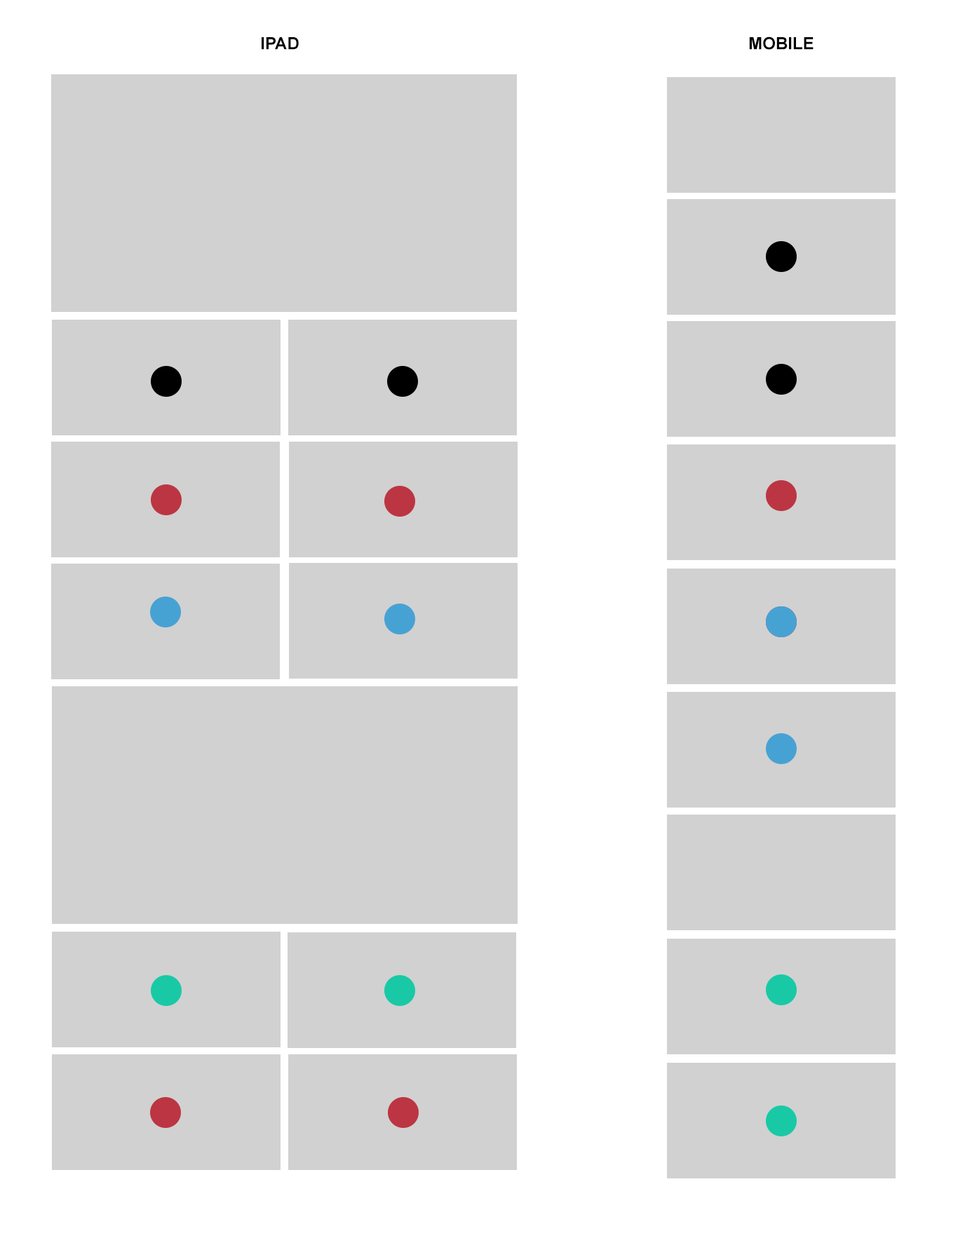
<style>
.page{position:relative;width:958px;height:1245px;background:#d1d1d1}
.page>*{position:absolute;margin:0}
.t1{font:16.8px "Arial-BoldMT";color:#000000}
</style>
<div class="page">
<p class="t1" style="left:262px;top:37px;width:37px;height:13px">IPAD</p>
<p class="t1" style="left:749px;top:36px;width:64px;height:14px">MOBILE</p>
</div>
